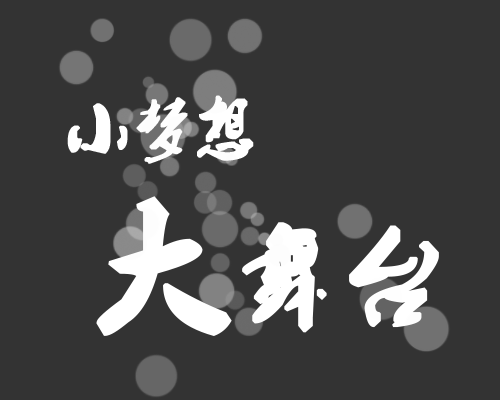
<style>
.page{position:relative;width:500px;height:400px;background:#333333}
.page>*{position:absolute;margin:0}
.t1{font:62.5px "2.0-";color:#ffffff;font-weight:bold}
.t2{font:104.2px "2.0-";color:#ffffff;font-weight:bold}
.t3{font:141.7px "2.0-";color:#ffffff;font-weight:bold}
</style>
<div class="page">
<p class="t1" style="left:67px;top:95px;width:187px;height:69px">小梦想</p>
<p class="t2" style="left:96px;top:196px;width:343px;height:140px"><span class="t3">大</span>舞台</p>
</div>
